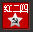
<style>
.page{position:relative;width:33px;height:32px;background:#c50000}
.page>*{position:absolute;margin:0}
.t1{font:10.4px "SimSun";letter-spacing:-0.25em;color:#ffffff}
</style>
<div class="page">
<p class="t1" style="left:4px;top:4px;width:24px;height:9px">红二四</p>
</div>
